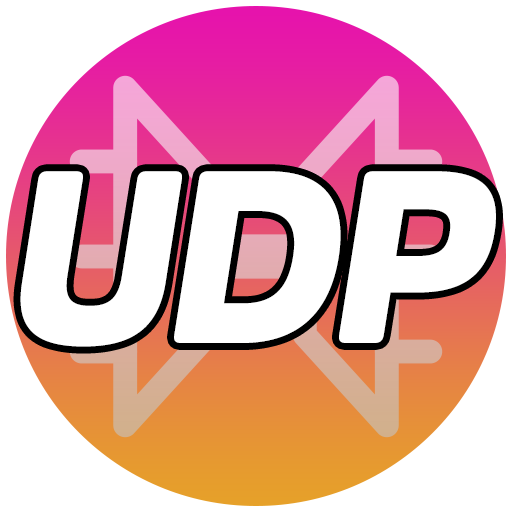
<style>
.page{position:relative;width:512px;height:512px;background:#ffffff}
.page>*{position:absolute;margin:0}
.t1{font:242.2px "AmsiProAKSNormal-BlackItalic";letter-spacing:-0.05em;color:#ffffff}
</style>
<div class="page">
<p class="t1" style="left:20px;top:171px;width:476px;height:176px">UDP</p>
</div>
